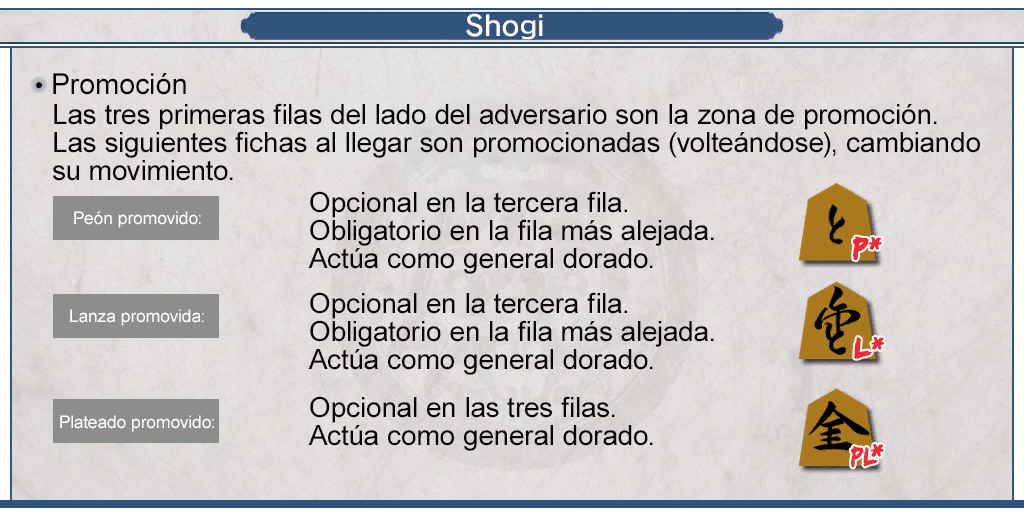
<style>
.page{position:relative;width:1024px;height:512px}
.page>*{position:absolute;margin:0}
.t1{font:29px "ArialMT";color:#080408}
.t2{font:28px/28px "ArialMT";color:#080408}
.t3{font:17.6px "ArialMT";color:#ffffff}
.t4{font:27.1px "EdoSZ";color:#ef283a;scale:0.92 1}
</style>
<div class="page">
<p class="t1" style="left:53px;top:73px;width:133px;height:22px">Promoción</p>
<p class="t2" style="left:53px;top:103px;width:927px;height:78px">Las tres primeras filas del lado del adversario son la zona de promoción. <br>Las siguientes fichas al llegar son promocionadas (volteándose), cambiando <br>su movimiento.</p>
<p class="t2" style="left:308px;top:191px;width:406px;height:83px">Opcional en la tercera fila.<br>Obligatorio en la fila más alejada.<br>Actúa como general dorado.</p>
<p class="t3" style="left:74px;top:211px;width:127px;height:17px">Peón promovido:</p>
<p class="t2" style="left:308px;top:292px;width:406px;height:83px">Opcional en la tercera fila.<br>Obligatorio en la fila más alejada.<br>Actúa como general dorado.</p>
<p class="t3" style="left:70px;top:309px;width:134px;height:17px">Lanza promovida:</p>
<p class="t2" style="left:308px;top:396px;width:345px;height:55px">Opcional en las tres filas.<br>Actúa como general dorado.</p>
<p class="t3" style="left:60px;top:415px;width:154px;height:17px">Plateado promovido:</p>
<p class="t4" style="left:850px;top:446px;width:28px;height:22px">PL</p>
</div>
